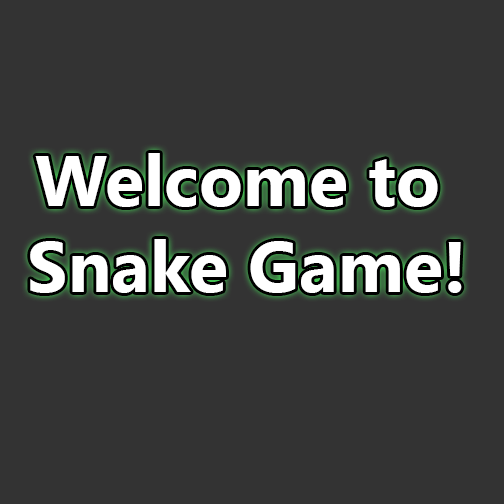
<style>
.page{position:relative;width:504px;height:504px;background:#333333}
.page>*{position:absolute;margin:0}
.t1{font:72px "SegoeUI-Bold";color:#ffffff}
</style>
<div class="page">
<p class="t1" style="left:30px;top:153px;width:432px;height:140px;text-align:center">Welcome to <br>Snake Game!</p>
</div>
